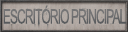
<style>
.page{position:relative;width:128px;height:32px}
.page>*{position:absolute;margin:0}
.t1{font:20px "ArialMT";letter-spacing:-0.075em;color:#6f6f71;scale:0.6 1}
</style>
<div class="page">
<p class="t1" style="left:3px;top:5px;width:123px;height:19px">ESCRITÓRIO PRINCIPAL</p>
</div>
